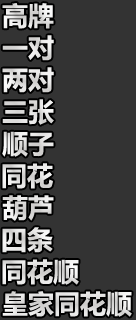
<style>
.page{position:relative;width:136px;height:320px;background:#333333}
.page>*{position:absolute;margin:0}
.t1{font:26px "MicrosoftYaHei-Bold";color:#e5e4e3}
.t2{font:26px "MicrosoftYaHei-Bold";color:#e2e2e1}
.t3{font:26px "MicrosoftYaHei-Bold";color:#e4e3e3}
.t4{font:26px "MicrosoftYaHei-Bold";color:#dededd}
.t5{font:26px "MicrosoftYaHei-Bold";color:#e3e2e2}
.t6{font:26px "MicrosoftYaHei-Bold";color:#e6e5e5}
.t7{font:26px "MicrosoftYaHei-Bold";color:#e0dfdf}
.t8{font:26px "MicrosoftYaHei-Bold";color:#e6e6e5}
.t9{font:26px "MicrosoftYaHei-Bold";color:#e4e3e2}
.t10{font:26px "MicrosoftYaHei-Bold";color:#e1e0df}
</style>
<div class="page">
<p class="t1" style="left:2px;top:3px;width:52px;height:26px">高牌</p>
<p class="t2" style="left:2px;top:35px;width:52px;height:26px">一对</p>
<p class="t3" style="left:2px;top:67px;width:52px;height:26px">两对</p>
<p class="t4" style="left:2px;top:99px;width:52px;height:26px">三张</p>
<p class="t5" style="left:2px;top:131px;width:52px;height:26px">顺子</p>
<p class="t6" style="left:2px;top:163px;width:51px;height:26px">同花</p>
<p class="t7" style="left:2px;top:195px;width:52px;height:26px">葫芦</p>
<p class="t8" style="left:2px;top:227px;width:51px;height:26px">四条</p>
<p class="t9" style="left:2px;top:259px;width:77px;height:26px">同花顺</p>
<p class="t10" style="left:2px;top:291px;width:130px;height:26px">皇家同花顺</p>
</div>
